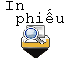
<style>
.page{position:relative;width:71px;height:58px;background:#ffffff}
.page>*{position:absolute;margin:0}
.t1{font:12px/13.3px "CourierNewPSMT";color:#000000}
</style>
<div class="page">
<p class="t1" style="left:6px;top:1px;width:58px;height:25px">In<br> phiếu</p>
</div>
